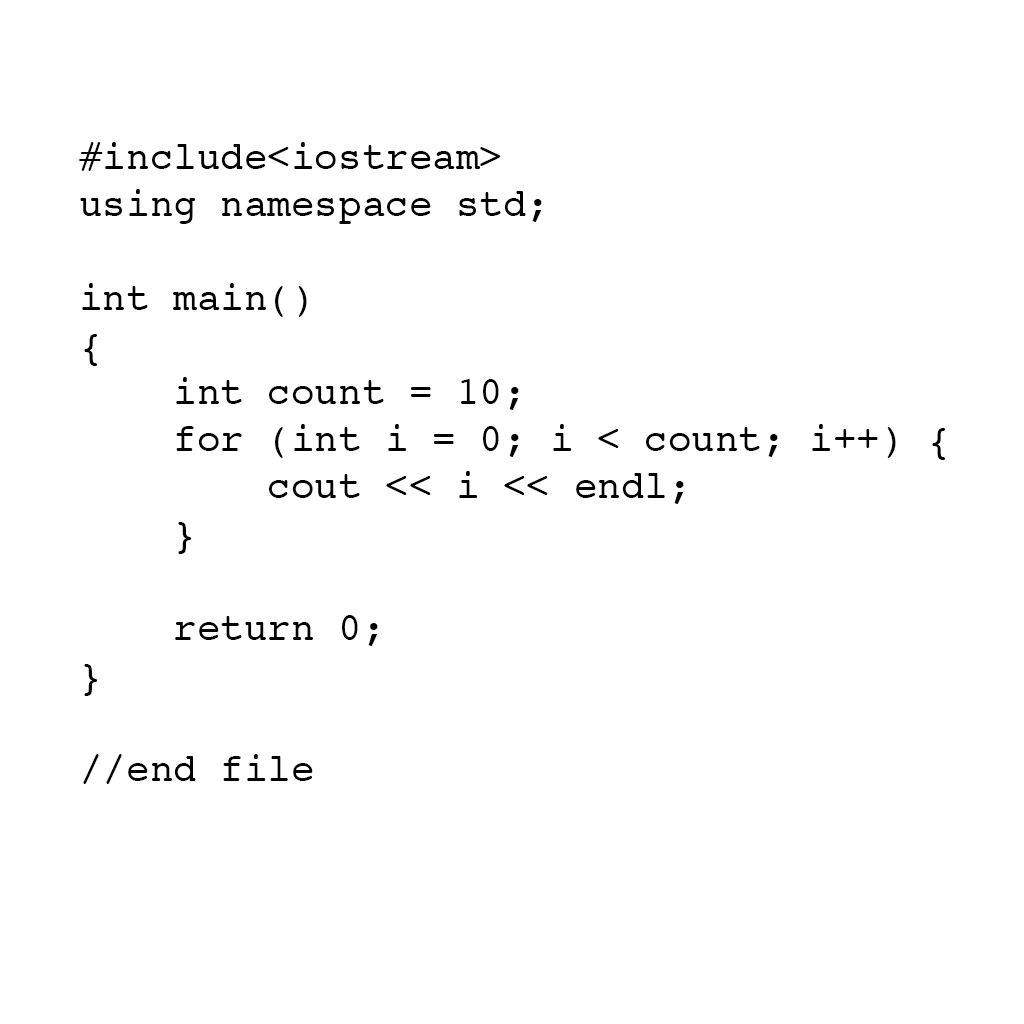
<style>
.page{position:relative;width:1024px;height:1024px;background:#ffffff}
.page>*{position:absolute;margin:0}
.t1{font:19.6px "Courier";color:#000000}
</style>
<div class="page">
<p class="t1" style="left:79px;top:142px;width:867px;height:642px">#include&lt;iostream&gt;<br>using namespace std;<br><br>int main()<br>{<br>    int count = 10;<br>    for (int i = 0; i &lt; count; i++) {<br>        cout &lt;&lt; i &lt;&lt; endl;<br>    }<br>    <br>    return 0;<br>}<br><br>//end file</p>
</div>
